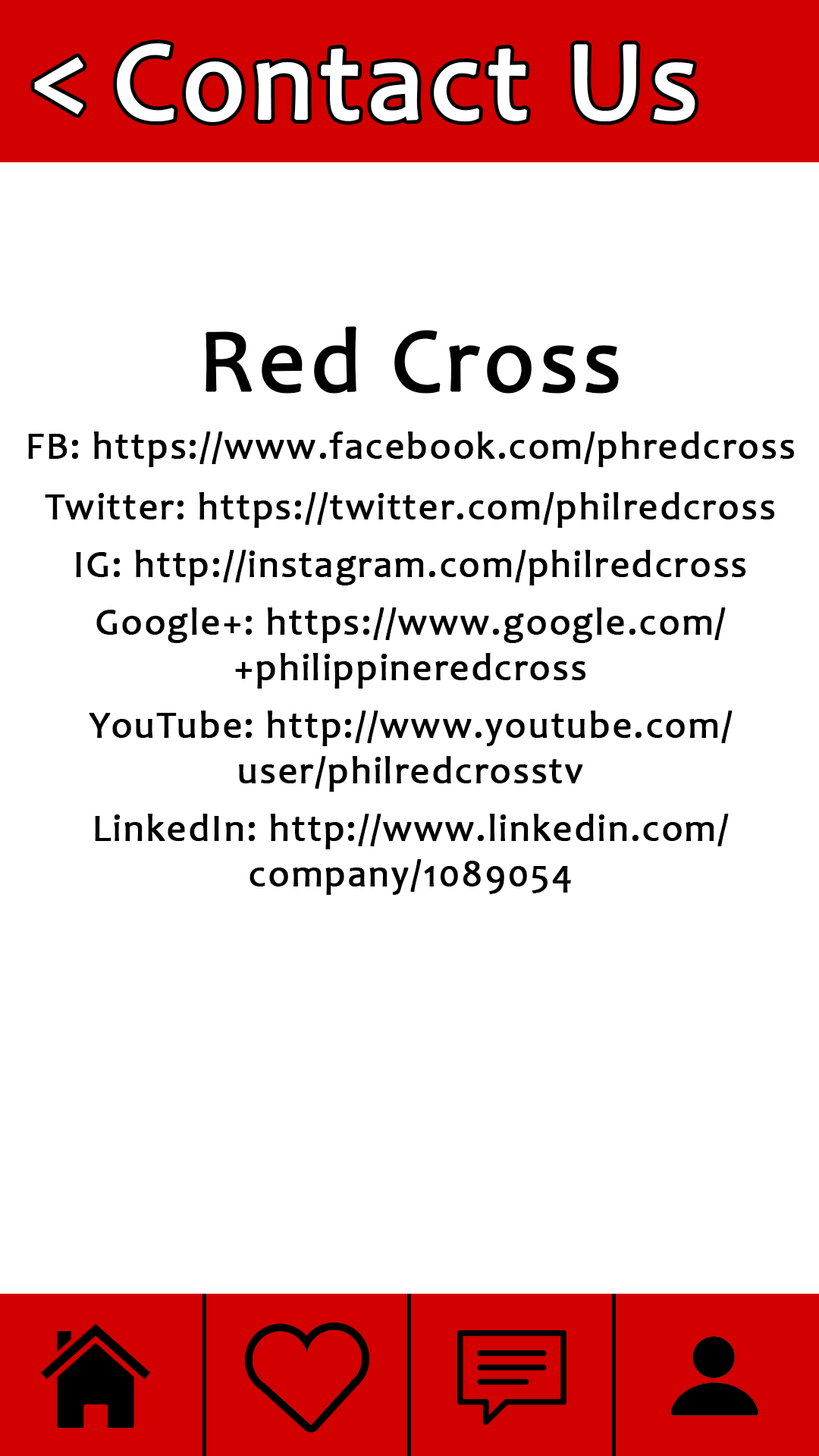
<style>
.page{position:relative;width:819px;height:1456px;background:#ffffff}
.page>*{position:absolute;margin:0}
.t1{font:113.4px "Candara";letter-spacing:0.03em;color:#ffffff;font-weight:bold}
.t2{font:113.7px "Candara";letter-spacing:0.03em;color:#ffffff;font-weight:bold}
.t3{font:91px "Candara";letter-spacing:0.03em;color:#000000;font-weight:bold}
.t4{font:37.9px "Candara";letter-spacing:0.03em;color:#000000;font-weight:bold}
</style>
<div class="page">
<p class="t1" style="left:117px;top:43px;width:578px;height:79px">Contact Us</p>
<p class="t2" style="left:34px;top:57px;width:49px;height:58px">&lt;</p>
<p class="t3" style="left:206px;top:326px;width:413px;height:68px">Red Cross</p>
<p class="t4" style="left:28px;top:431px;width:767px;height:36px">FB: https://www.facebook.com/phredcross</p>
<p class="t4" style="left:45px;top:492px;width:730px;height:36px">Twitter: https://twitter.com/philredcross</p>
<p class="t4" style="left:76px;top:550px;width:670px;height:35px">IG: http://instagram.com/philredcross</p>
<p class="t4" style="left:96px;top:607px;width:630px;height:82px;text-align:center">Google+: https://www.google.com/<br>+philippineredcross</p>
<p class="t4" style="left:89px;top:711px;width:644px;height:81px;text-align:center">YouTube: http://www.youtube.com/<br>user/philredcrosstv</p>
<p class="t4" style="left:95px;top:814px;width:634px;height:81px;text-align:center">LinkedIn: http://www.linkedin.com/<br>company/1089054</p>
</div>
